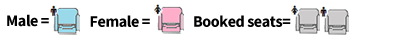
<style>
.page{position:relative;width:400px;height:40px;background:#ffffff}
.page>*{position:absolute;margin:0}
.t1{font:16px "SourceSansPro-Bold";letter-spacing:-0.025em;color:#000000}
</style>
<div class="page">
<p class="t1" style="left:7px;top:14px;width:42px;height:13px">Male =</p>
<p class="t1" style="left:90px;top:15px;width:60px;height:12px">Female =</p>
<p class="t1" style="left:194px;top:15px;width:97px;height:12px">Booked seats=</p>
</div>
